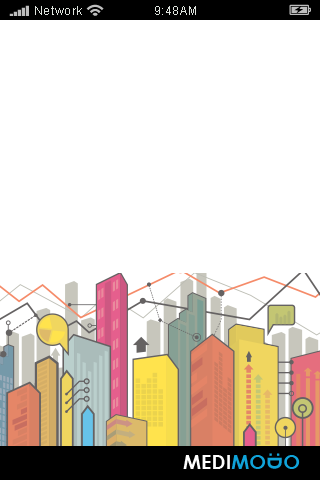
<style>
.page{position:relative;width:320px;height:480px;background:#ffffff}
.page>*{position:absolute;margin:0}
.t1{font:12px "ArialMT";letter-spacing:0.05em;color:#dfe4de}
</style>
<div class="page">
<p class="t1" style="left:35px;top:6px;width:47px;height:9px">Network</p>
<p class="t1" style="left:155px;top:6px;width:41px;height:9px">9:48AM</p>
</div>
